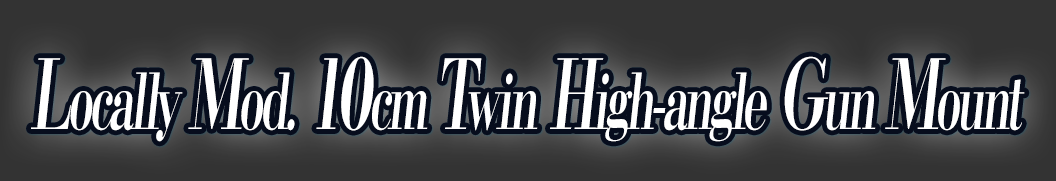
<style>
.page{position:relative;width:1056px;height:181px;background:#333333}
.page>*{position:absolute;margin:0}
.t1{font:76.8px "KochoStd-Heavy";letter-spacing:-0.08em;color:#ffffff;font-style:italic;scale:0.61 1}
.t2{font:96px "KochoStd-Heavy";letter-spacing:-0.08em;color:#ffffff;font-style:italic;scale:0.61 1}
</style>
<div class="page">
<p class="t1" style="left:31px;top:56px;width:994px;height:86px"><span class="t2">L</span>ocally <span class="t2">M</span>od.<span class="t2"> 10</span>cm <span class="t2">T</span>win<span class="t2"> H</span>igh-angle<span class="t2"> G</span>un <span class="t2">M</span>ount</p>
</div>
